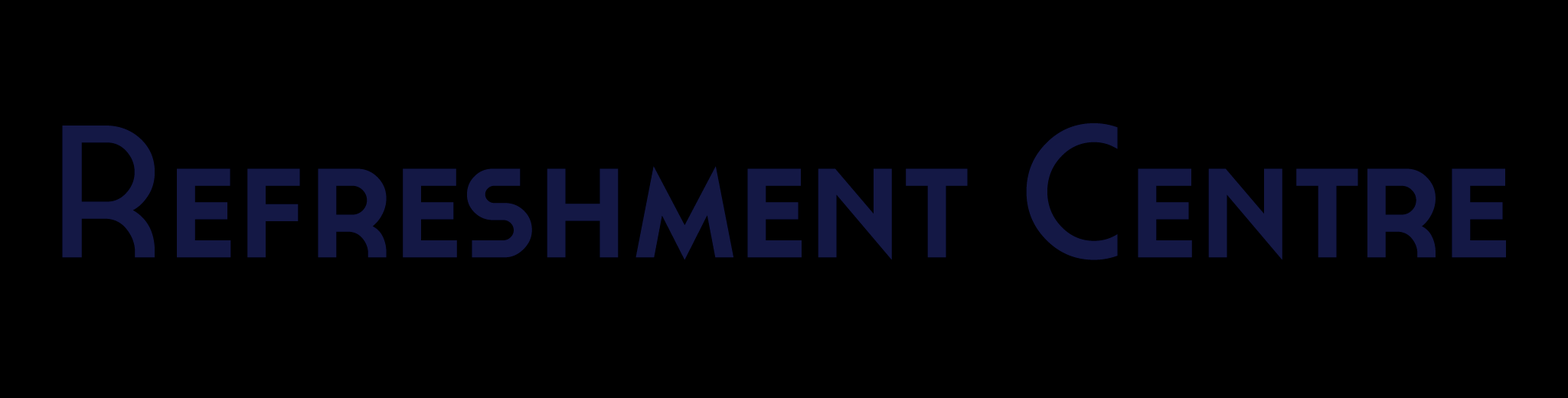
<style>
.page{position:relative;width:1568px;height:398px;background:#000000}
.page>*{position:absolute;margin:0}
.t1{font:188px "Cassannet-Regular";color:#141845}
</style>
<div class="page">
<p class="t1" style="left:62px;top:123px;width:1444px;height:137px">Refreshment Centre</p>
</div>
